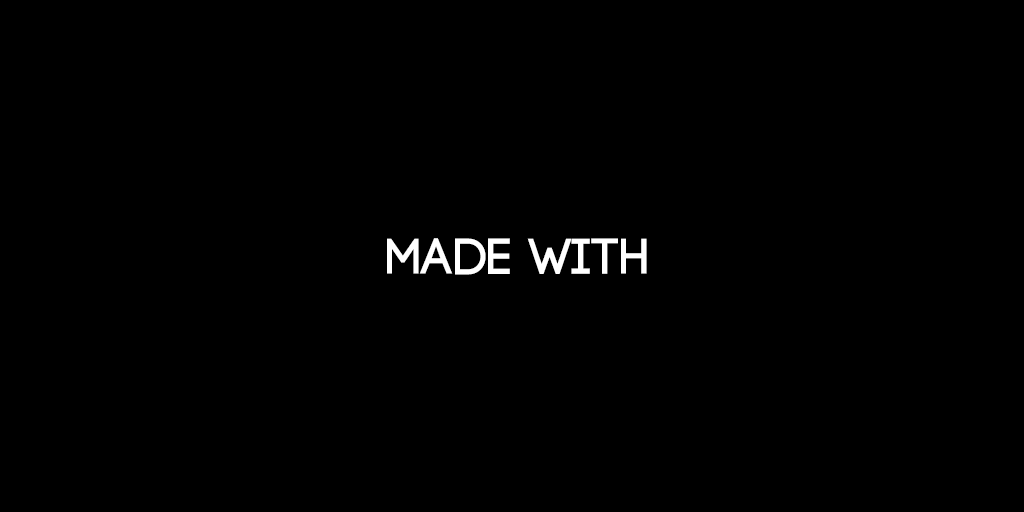
<style>
.page{position:relative;width:1024px;height:512px;background:#000000}
.page>*{position:absolute;margin:0}
.t1{font:51px "Code-Bold";color:#ffffff}
</style>
<div class="page">
<p class="t1" style="left:387px;top:238px;width:260px;height:37px">Made With</p>
</div>
